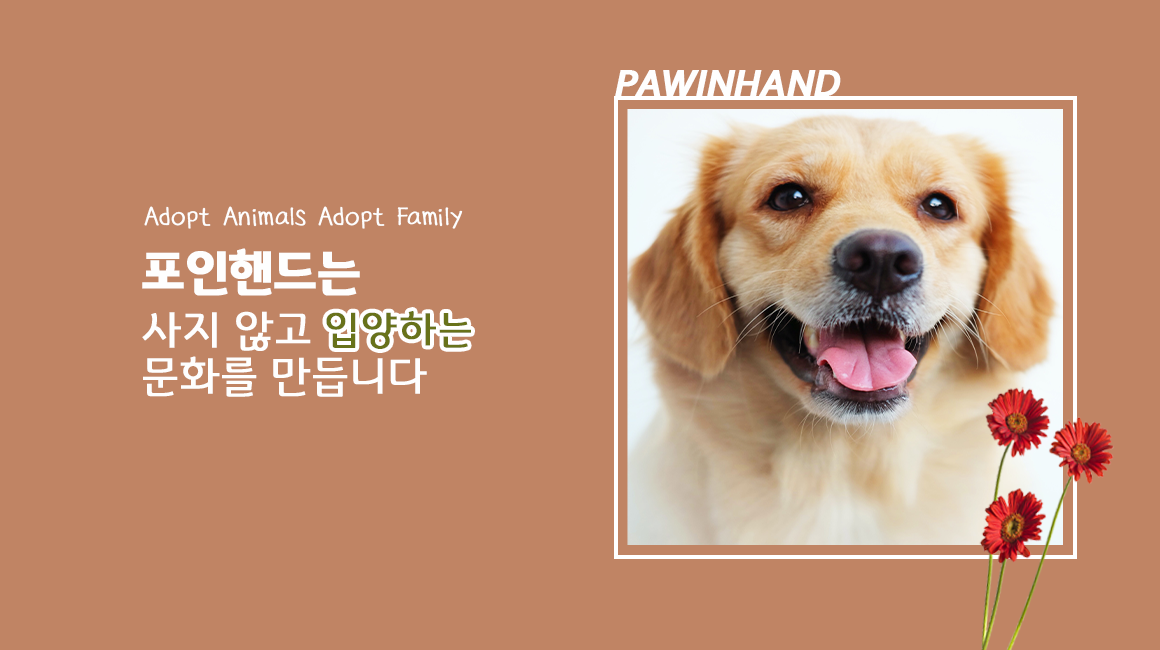
<style>
.page{position:relative;width:1160px;height:650px;background:#c08464}
.page>*{position:absolute;margin:0}
.t1{font:40px "Corbel-BoldItalic";letter-spacing:-0.03em;color:#fefefe;font-weight:bold}
.t2{font:28px "ACCchildrenheartOTF";letter-spacing:-0.03em;color:#fefefe;font-weight:bold}
.t3{font:45px/46px "GyeonggiTitleL";letter-spacing:-0.01em;color:#fefefe;font-weight:bold}
.t4{font:50px/46px "GyeonggiTitleB";letter-spacing:-0.01em;color:#fefefe;font-weight:bold}
.t5{font:41px "GyeonggiTitleL";letter-spacing:0.03em;color:#68721a;font-weight:bold}
</style>
<div class="page">
<p class="t1" style="left:615px;top:70px;width:226px;height:27px">PAWINHAND</p>
<p class="t2" style="left:144px;top:206px;width:319px;height:23px">Adopt Animals Adopt Family</p>
<p class="t3" style="left:142px;top:248px;width:285px;height:149px"><span class="t4">포인핸드는<br></span>사지 않고<br>문화를 만듭니다</p>
<p class="t5" style="left:326px;top:311px;width:145px;height:38px">입양하는</p>
</div>
